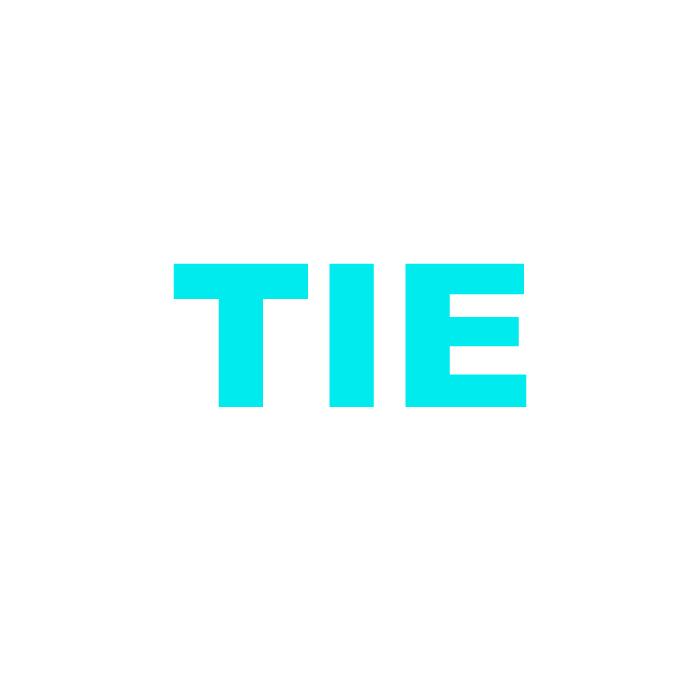
<style>
.page{position:relative;width:700px;height:700px;background:#ffffff}
.page>*{position:absolute;margin:0}
.t1{font:200px "Arial-Black";color:#00ebee}
</style>
<div class="page">
<p class="t1" style="left:173px;top:263px;width:354px;height:144px">TIE</p>
</div>
